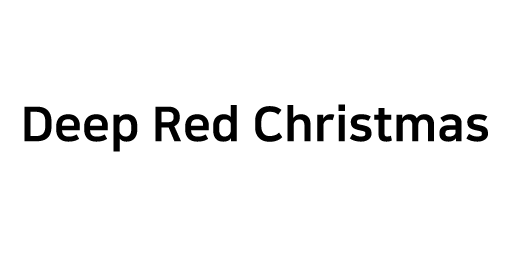
<style>
.page{position:relative;width:512px;height:256px;background:#ffffff}
.page>*{position:absolute;margin:0}
.t1{font:48px "NanumSquareEB";color:#000000}
</style>
<div class="page">
<p class="t1" style="left:24px;top:104px;width:464px;height:48px">Deep Red Christmas</p>
</div>
